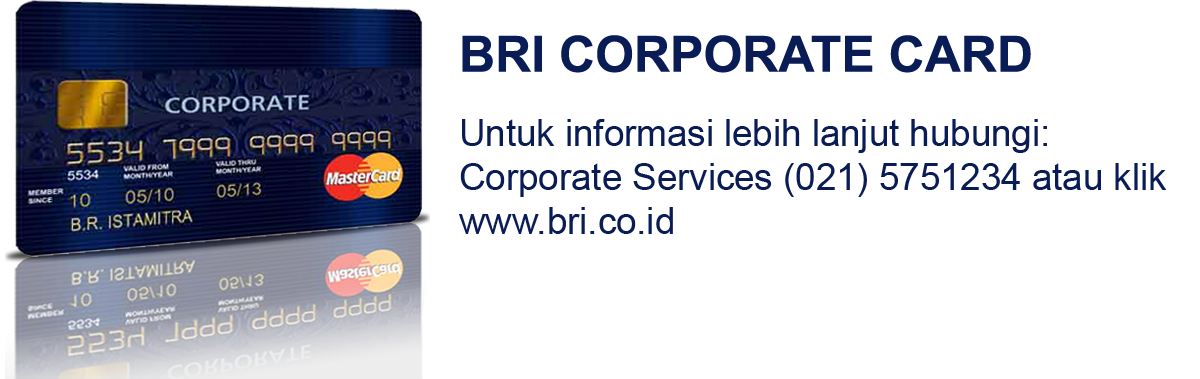
<style>
.page{position:relative;width:1200px;height:379px;background:#ffffff}
.page>*{position:absolute;margin:0}
.t1{font:50px "Arial-BoldMT";color:#091c55}
.t2{font:36.7px "ArialMT";color:#091c55}
.t3{font:30px "ArialMT";color:#091c55}
</style>
<div class="page">
<p class="t1" style="left:462px;top:35px;width:569px;height:38px">BRI CORPORATE CARD</p>
<p class="t2" style="left:458px;top:119px;width:709px;height:115px">Untuk informasi lebih lanjut hubungi:<br>Corporate Services (021) 5751234 atau klik<br>www.bri.co.id<br><span class="t3"><br><br><br><br><br>;</span></p>
</div>
